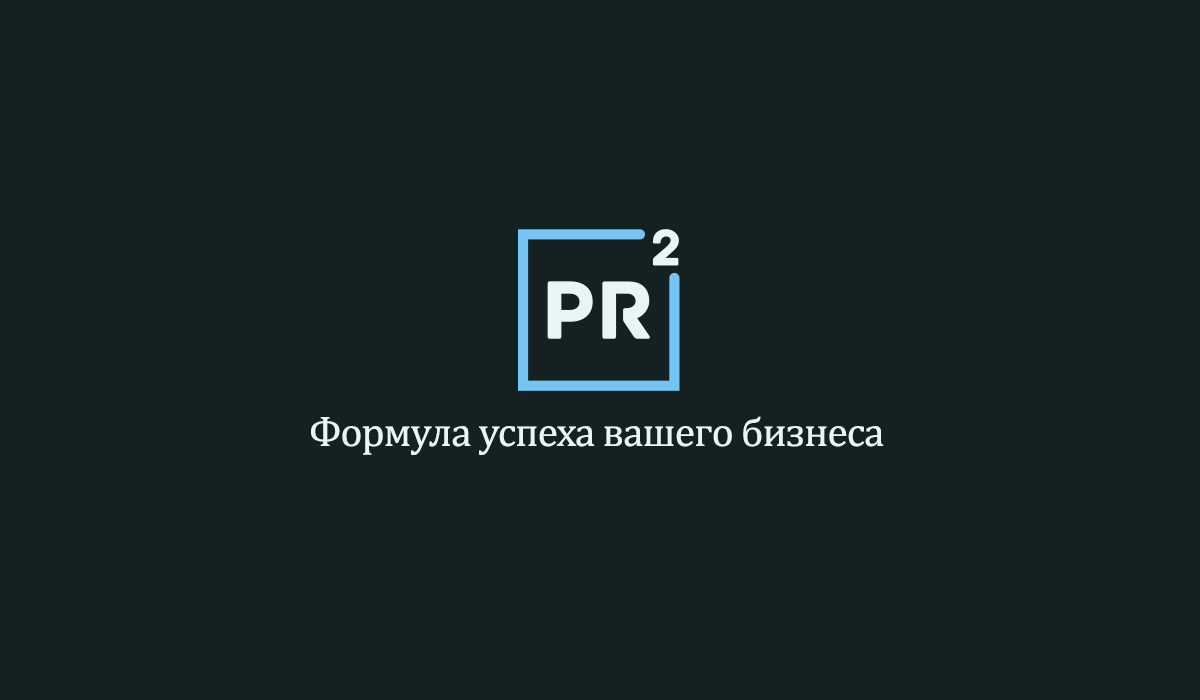
<style>
.page{position:relative;width:1200px;height:700px;background:#152023}
.page>*{position:absolute;margin:0}
.t1{font:41.7px "Cambria";letter-spacing:-0.025em;color:#e8f4f6}
</style>
<div class="page">
<p class="t1" style="left:311px;top:416px;width:573px;height:39px">Формула успеха вашего бизнеса</p>
</div>
